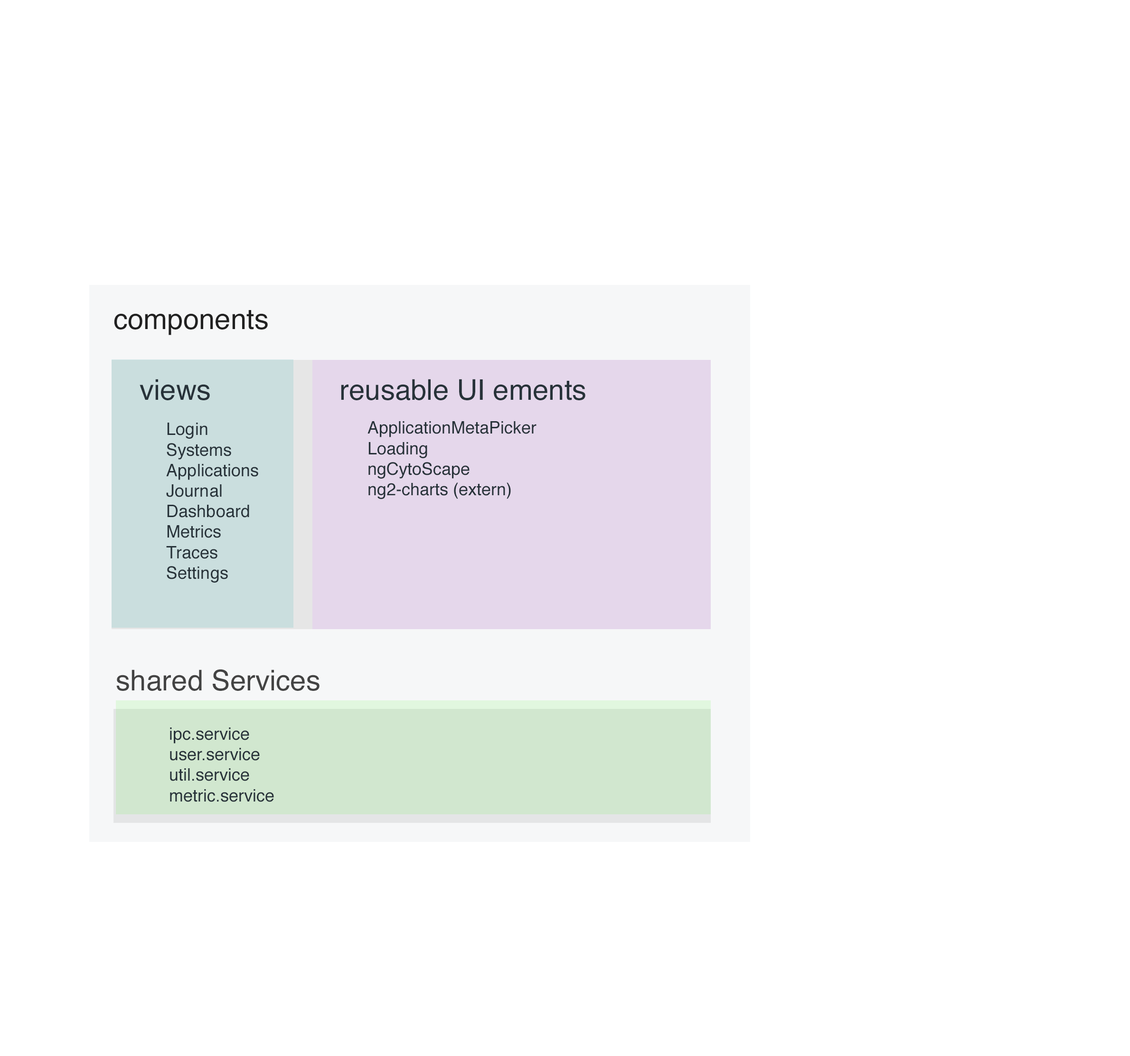
<style>
.page{position:relative;width:1130px;height:1056px;background:#ffffff}
.page>*{position:absolute;margin:0}
.t1{font:28.5px "Helvetica";color:#212121}
.t2{font:28.5px "Helvetica";color:#273239}
.t3{font:17.1px "Helvetica";color:#273239}
.t4{font:28.5px "Helvetica";color:#434343}
</style>
<div class="page">
<p class="t1" style="left:114px;top:310px;width:154px;height:25px">components</p>
<p class="t2" style="left:140px;top:379px;width:70px;height:21px">views</p>
<p class="t2" style="left:341px;top:379px;width:244px;height:21px">reusable UI ements</p>
<p class="t3" style="left:166px;top:422px;width:92px;height:160px">Login<br>Systems<br>Applications<br>Journal<br>Dashboard<br>Metrics<br>Traces<br>Settings</p>
<p class="t3" style="left:367px;top:421px;width:169px;height:78px">ApplicationMetaPicker<br>Loading<br>ngCytoScape<br>ng2-charts (extern)</p>
<p class="t4" style="left:116px;top:669px;width:203px;height:22px">shared Services</p>
<p class="t3" style="left:170px;top:727px;width:104px;height:75px">ipc.service<br>user.service<br>util.service<br>metric.service</p>
</div>
